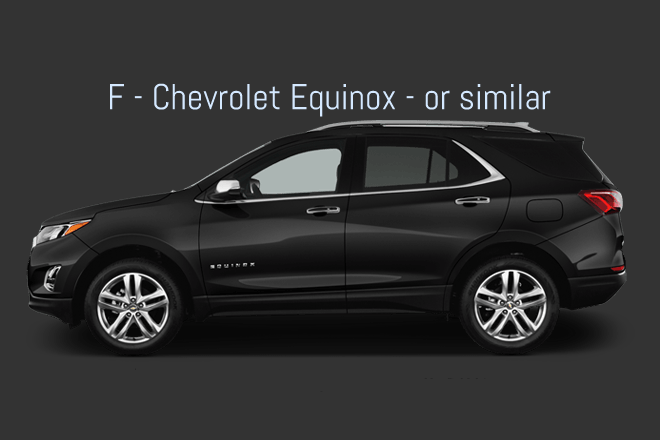
<style>
.page{position:relative;width:660px;height:440px;background:#333333}
.page>*{position:absolute;margin:0}
.t1{font:36px "Abel-Regular";color:#d5e9ff}
</style>
<div class="page">
<p class="t1" style="left:109px;top:83px;width:442px;height:34px">F - Chevrolet Equinox - or similar</p>
</div>
